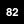
<style>
.page{position:relative;width:24px;height:24px;background:#000000}
.page>*{position:absolute;margin:0}
.t1{font:11px "HelveticaWorld-Bold";color:#ffffff}
</style>
<div class="page">
<p class="t1" style="left:6px;top:8px;width:13px;height:8px">82</p>
</div>
